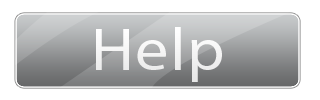
<style>
.page{position:relative;width:320px;height:100px;background:#ffffff}
.page>*{position:absolute;margin:0}
.t1{font:59.6px "MyriadPro-Regular";letter-spacing:0.02em;color:#f4f4f4;scale:1.12 1}
</style>
<div class="page">
<p class="t1" style="left:96px;top:27px;width:126px;height:55px">Help</p>
</div>
